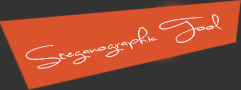
<style>
.page{position:relative;width:241px;height:90px;background:#da532c}
.page>*{position:absolute;margin:0}
.t1{font:18.7px "SweetlyBroken";color:#faf5f3;scale:1.63 1}
</style>
<div class="page">
<p class="t1" style="left:25px;top:14px;width:197px;height:55px;rotate:-11deg">Steganographic Tool</p>
</div>
